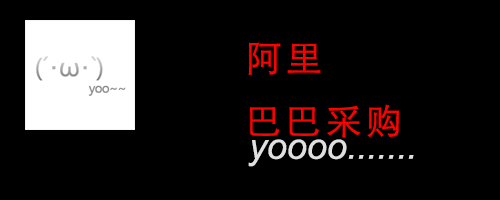
<style>
.page{position:relative;width:500px;height:200px;background:#000000}
.page>*{position:absolute;margin:0}
.t1{font:36px "STHeitiSC-Light";letter-spacing:0.1em;color:#ff0000}
.t2{font:36px "Arial-ItalicMT";color:#e0e0e0}
</style>
<div class="page">
<p class="t1" style="left:248px;top:42px;width:151px;height:96px">阿里<br>巴巴采购</p>
<p class="t2" style="left:248px;top:139px;width:166px;height:28px">yoooo.......</p>
</div>
